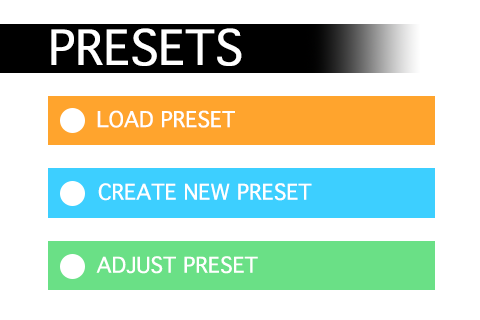
<style>
.page{position:relative;width:480px;height:320px;background:#ffffff}
.page>*{position:absolute;margin:0}
.t1{font:46.4px "Thonburi";color:#ffffff}
.t2{font:20.8px "Thonburi";color:#ffffff}
</style>
<div class="page">
<p class="t1" style="left:51px;top:28px;width:191px;height:38px">PRESETS</p>
<p class="t2" style="left:97px;top:110px;width:138px;height:18px">LOAD PRESET</p>
<p class="t2" style="left:98px;top:183px;width:214px;height:18px">CREATE NEW PRESET</p>
<p class="t2" style="left:96px;top:256px;width:162px;height:18px">ADJUST PRESET</p>
</div>
